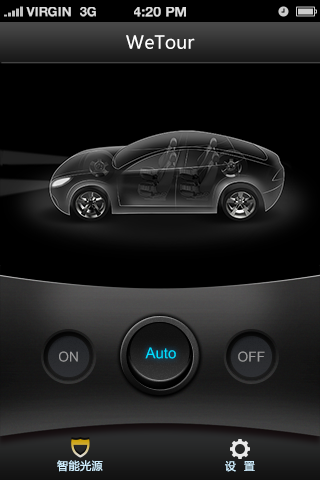
<style>
.page{position:relative;width:320px;height:480px;background:#000000}
.page>*{position:absolute;margin:0}
.t1{font:13px "HelveticaNeue-Bold";color:#dddddd;text-transform:uppercase}
.t2{font:14px "HelveticaNeue-Bold";color:#dddddd;text-transform:uppercase}
.t3{font:18px "MicrosoftYaHei";color:#ffffff}
.t4{font:13.4px "Kartika";color:#999999}
.t5{font:14.6px "Kartika";color:#00deff}
.t6{font:11px "MicrosoftYaHei";letter-spacing:0.02em;color:#cfeefe;font-weight:bold}
</style>
<div class="page">
<p class="t1" style="left:26px;top:7px;width:45px;height:10px">VIRGIN</p>
<p class="t1" style="left:80px;top:7px;width:16px;height:10px">3G</p>
<p class="t2" style="left:134px;top:7px;width:52px;height:10px">4:20 pM</p>
<p class="t3" style="left:126px;top:35px;width:69px;height:14px">WeTour</p>
<p class="t4" style="left:59px;top:351px;width:19px;height:11px">ON</p>
<p class="t5" style="left:145px;top:347px;width:31px;height:12px">Auto</p>
<p class="t4" style="left:238px;top:351px;width:27px;height:11px">OFF</p>
<p class="t6" style="left:57px;top:460px;width:46px;height:12px">智能光源</p>
<p class="t6" style="left:225px;top:461px;width:30px;height:11px">设  置</p>
</div>
